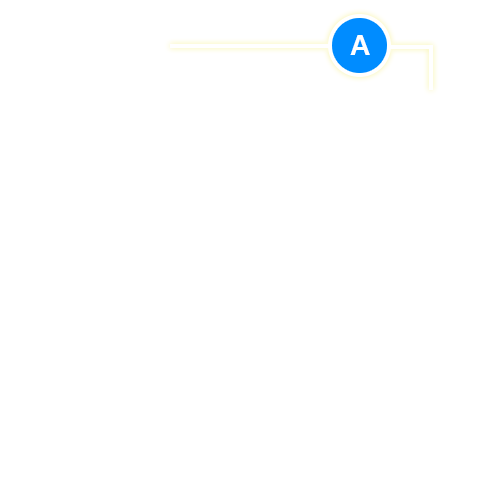
<style>
.page{position:relative;width:500px;height:500px;background:#ffffff}
.page>*{position:absolute;margin:0}
.t1{font:26.7px "Arial-BoldMT";color:#ffffff}
</style>
<div class="page">
<p class="t1" style="left:350px;top:35px;width:20px;height:20px">A</p>
</div>
